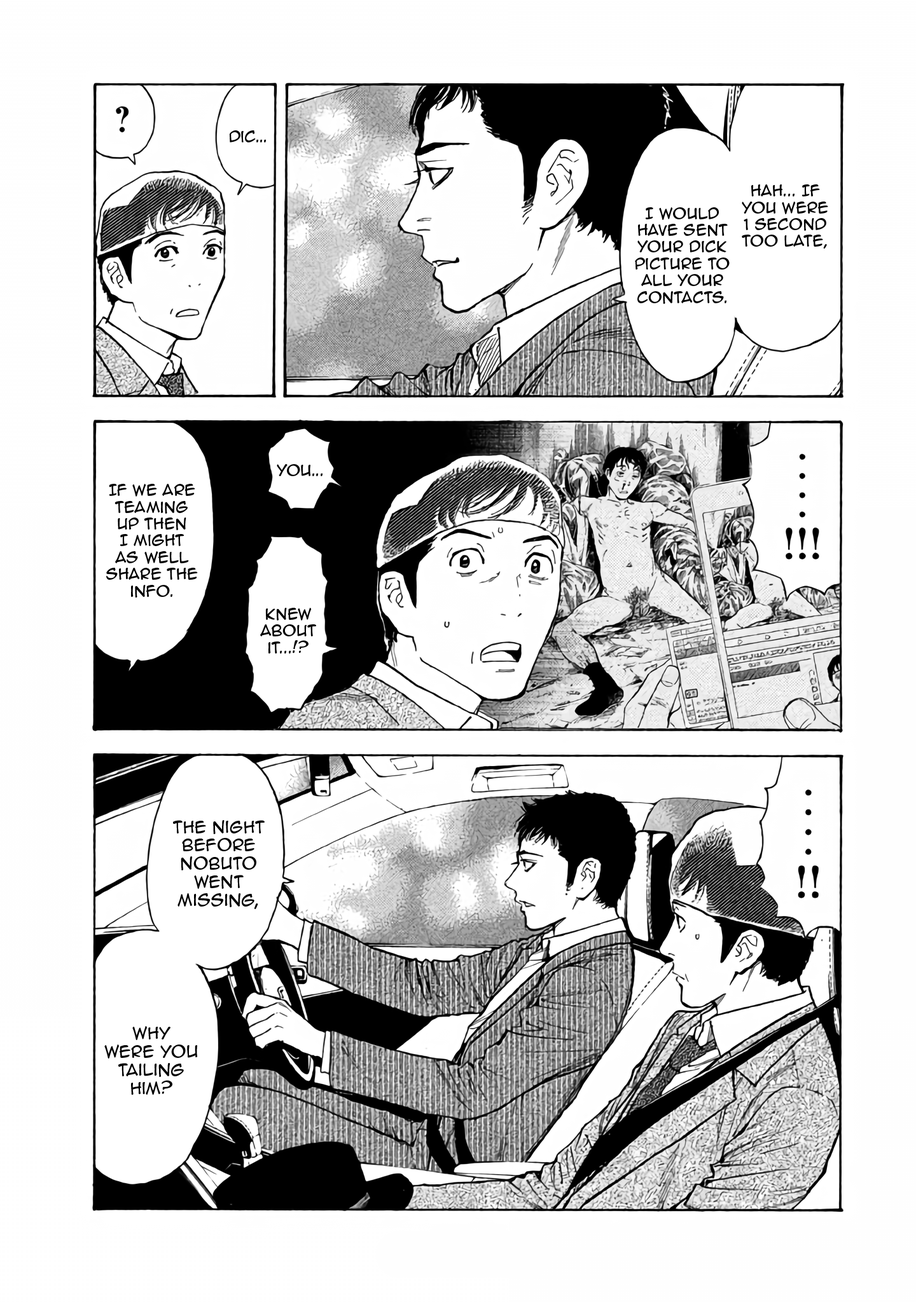
<style>
.page{position:relative;width:916px;height:1302px;background:#ffffff}
.page>*{position:absolute;margin:0}
.t1{font:14px "AnimeAce2.0BB";color:#000000}
.t2{font:15.3px "AnimeAce2.0BB";color:#000000}
</style>
<div class="page">
<p class="t1" style="left:229px;top:130px;width:37px;height:12px">Dic...</p>
<p class="t1" style="left:741px;top:184px;width:87px;height:65px;text-align:center">Hah... If you were 1 second  too late,</p>
<p class="t1" style="left:635px;top:207px;width:94px;height:97px;text-align:center">I would have sent your dick picture to all your contacts.</p>
<p class="t1" style="left:277px;top:464px;width:46px;height:12px">You...</p>
<p class="t1" style="left:106px;top:484px;width:92px;height:114px;text-align:center">If we are teaming up then I might as well share the info.</p>
<p class="t1" style="left:260px;top:608px;width:56px;height:46px;text-align:center">Knew about it...!?</p>
<p class="t2" style="left:173px;top:820px;width:92px;height:89px;text-align:center">The night before Nobuto went missing,</p>
<p class="t2" style="left:104px;top:1026px;width:94px;height:69px;text-align:center">Why were you tailing him?</p>
</div>
